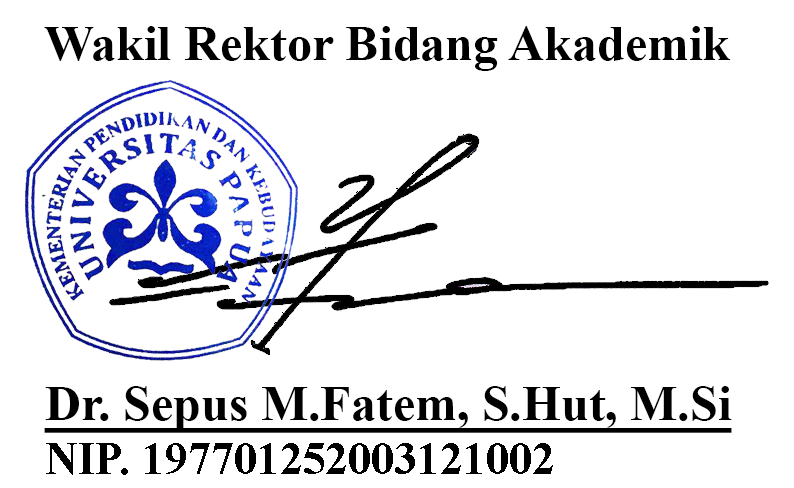
<style>
.page{position:relative;width:794px;height:488px;background:#ffffff}
.page>*{position:absolute;margin:0}
.t1{font:50px "TimesNewRomanPS-BoldMT";color:#000000}
.t2{font:50px "TimesNewRomanPS-BoldMT";color:#000000;text-decoration:underline}
.t3{font:45.8px "TimesNewRomanPS-BoldMT";color:#000000}
</style>
<div class="page">
<p class="t1" style="left:44px;top:26px;width:687px;height:45px">Wakil Rektor Bidang Akademik</p>
<p class="t2" style="left:44px;top:386px;width:688px;height:47px">Dr. Sepus M.Fatem, S.Hut, M.Si</p>
<p class="t3" style="left:46px;top:443px;width:507px;height:32px">NIP. 197701252003121002</p>
</div>
